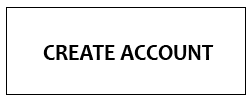
<style>
.page{position:relative;width:250px;height:100px;background:#ffffff}
.page>*{position:absolute;margin:0}
.t1{font:24px "Candara-Bold";color:#000000;scale:0.91 1}
</style>
<div class="page">
<p class="t1" style="left:43px;top:45px;width:171px;height:15px">CREATE ACCOUNT</p>
</div>
